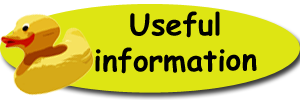
<style>
.page{position:relative;width:300px;height:100px;background:#dee513}
.page>*{position:absolute;margin:0}
.t1{font:30px "ComicSansMS-Bold";color:#000000}
</style>
<div class="page">
<p class="t1" style="left:95px;top:11px;width:162px;height:63px;text-align:center">Useful <br>information</p>
</div>
